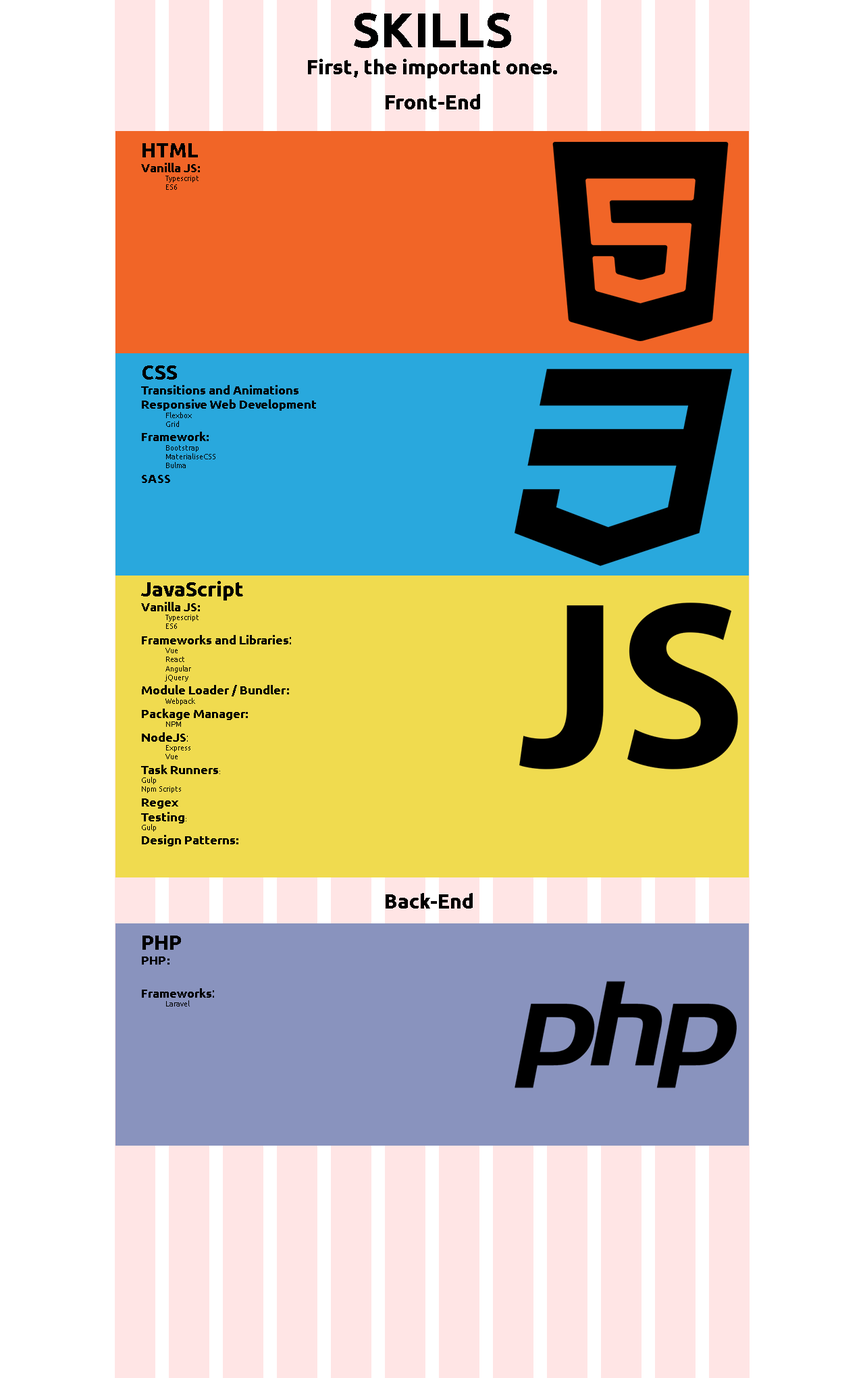
<style>
.page{position:relative;width:865px;height:1378px;background:#ffffff}
.page>*{position:absolute;margin:0}
.t1{font:48.6px "Ubuntu-Bold";color:#000000}
.t2{font:20.3px "Ubuntu-Bold";color:#000000}
.t3{font:7.4px "Ubuntu";color:#000000}
.t4{font:12.2px "Ubuntu-Bold";color:#000000}
.t5{font:12.8px "Ubuntu";color:#000000}
.t6{font:12.2px "Ubuntu";color:#000000}
</style>
<div class="page">
<p class="t1" style="left:354px;top:13px;width:157px;height:35px">SKILLS</p>
<p class="t2" style="left:308px;top:59px;width:249px;height:19px">First, the important ones.</p>
<p class="t2" style="left:386px;top:94px;width:94px;height:15px">Front-End</p>
<p class="t3" style="left:141px;top:143px;width:59px;height:47px"><span class="t2">HTML<br></span><span class="t4">Vanilla JS:<br></span> Typescript<br> ES6</p>
<p class="t4" style="left:141px;top:365px;width:175px;height:118px"><span class="t2">CSS<br></span>Transitions and Animations<br>Responsive Web Development<br><span class="t3"> Flexbox<br> Grid<br></span>Framework:<br><span class="t3"> Bootstrap<br> MaterialiseCSS<br> Bulma<br></span>SASS</p>
<p class="t3" style="left:141px;top:581px;width:150px;height:265px"><span class="t2">JavaScript<br></span><span class="t4">Vanilla JS:<br></span> Typescript<br> ES6<br><span class="t4">Frameworks and Libraries</span><span class="t5">:<br></span> Vue<br> React<br> Angular<br> jQuery<br><span class="t4">Module Loader / Bundler:<br></span> Webpack<br><span class="t4">Package Manager:<br></span> NPM<br><span class="t4">NodeJS</span><span class="t6">:<br></span> Express<br> Vue<br><span class="t4">Task Runners</span>:<br>Gulp<br>Npm Scripts<br><span class="t4">Regex<br>Testing</span>:<br>Gulp<br><span class="t4">Design Patterns:</span></p>
<p class="t2" style="left:386px;top:893px;width:87px;height:16px">Back-End</p>
<p class="t4" style="left:142px;top:936px;width:72px;height:70px"><span class="t2">PHP<br></span>PHP:<br> <br> <br>Frameworks<span class="t5">:<br></span><span class="t3"> Laravel</span></p>
</div>
